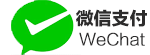
<style>
.page{position:relative;width:150px;height:55px;background:#ffffff}
.page>*{position:absolute;margin:0}
.t1{font:18px "FZLTTHK--GBK1-0";color:#2d2c2c}
.t2{font:16px "FZLTXHK--GBK1-0";color:#2d2c2c;font-weight:bold}
</style>
<div class="page">
<p class="t1" style="left:76px;top:9px;width:71px;height:18px">微信支付</p>
<p class="t2" style="left:79px;top:32px;width:66px;height:14px">WeChat</p>
</div>
